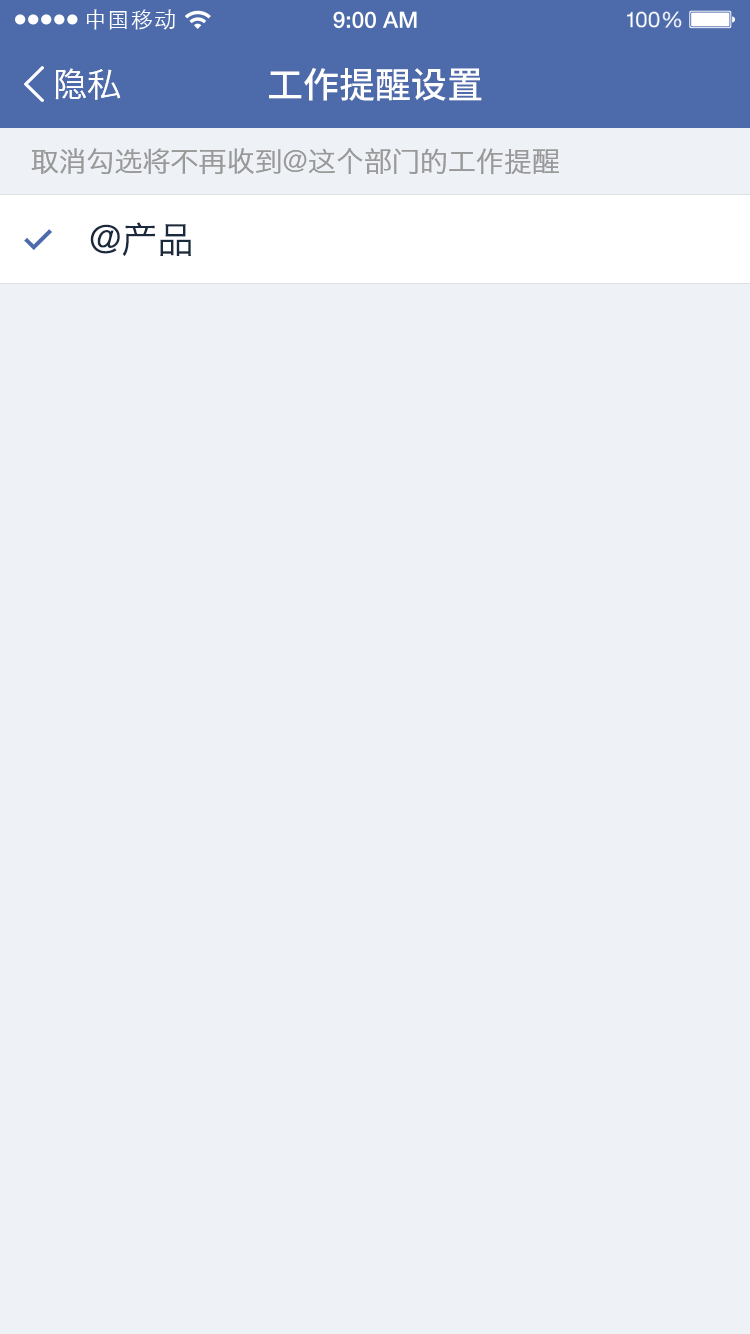
<style>
.page{position:relative;width:750px;height:1334px;background:#eef1f6}
.page>*{position:absolute;margin:0}
.t1{font:21.9px "STXihei";letter-spacing:0.04em;color:#ffffff}
.t2{font:34px "HiraginoSansGB-W3";color:#ffffff}
.t3{font:36px "NotoSansHans-Medium";color:#ffffff}
.t4{font:28px "HiraginoSansGB-W3";color:#999999}
.t5{font:36px "HiraginoSansGB-W3";color:#1a293e}
</style>
<div class="page">
<p class="t1" style="left:86px;top:9px;width:89px;height:21px">中国移动</p>
<p class="t2" style="left:55px;top:68px;width:66px;height:32px">隐私</p>
<p class="t3" style="left:269px;top:68px;width:213px;height:33px">工作提醒设置</p>
<p class="t4" style="left:31px;top:148px;width:528px;height:27px">取消勾选将不再收到@这个部门的工作提醒</p>
<p class="t5" style="left:90px;top:222px;width:101px;height:34px">@产品</p>
</div>
